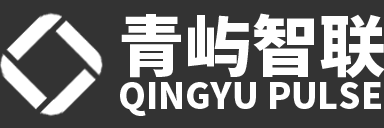
<style>
.page{position:relative;width:384px;height:128px;background:#333333}
.page>*{position:absolute;margin:0}
.t1{font:35.1px/65.8px "SourceHanSansSC-Heavy";color:#ffffff}
.t2{font:66.9px/65.8px "SourceHanSansSC-Heavy";color:#ffffff}
</style>
<div class="page">
<p class="t1" style="left:120px;top:13px;width:265px;height:103px"><span class="t2">青屿智联<br></span>QINGYU PULSE</p>
</div>
